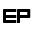
<style>
.page{position:relative;width:32px;height:32px;background:#ffffff}
.page>*{position:absolute;margin:0}
.t1{font:17px "Orena";color:#000000}
</style>
<div class="page">
<p class="t1" style="left:3px;top:9px;width:28px;height:14px">EP</p>
</div>
